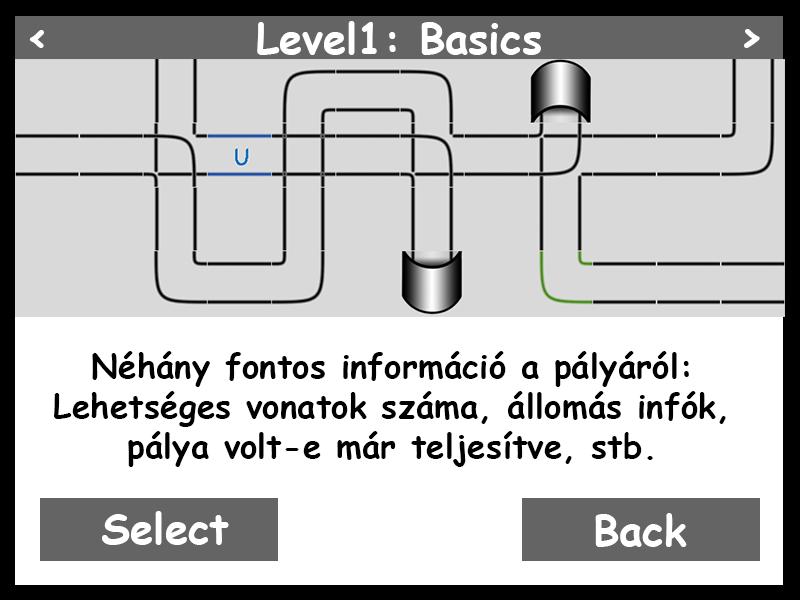
<style>
.page{position:relative;width:800px;height:600px;background:#d9d9d9}
.page>*{position:absolute;margin:0}
.t1{font:41.7px "ComicSansMS-Bold";color:#ffffff}
.t2{font:33.3px "ComicSansMS-Bold";color:#000000}
</style>
<div class="page">
<p class="t1" style="left:29px;top:30px;width:15px;height:18px">&lt;</p>
<p class="t1" style="left:257px;top:21px;width:284px;height:34px">Level1: Basics</p>
<p class="t1" style="left:744px;top:29px;width:16px;height:19px">&gt;</p>
<p class="t2" style="left:54px;top:351px;width:672px;height:116px;text-align:center">Néhány fontos információ a pályáról:<br>Lehetséges vonatok száma, állomás infók,<br>pálya volt-e már teljesítve, stb.</p>
<p class="t1" style="left:102px;top:511px;width:127px;height:34px">Select</p>
<p class="t1" style="left:595px;top:513px;width:92px;height:34px">Back</p>
</div>
